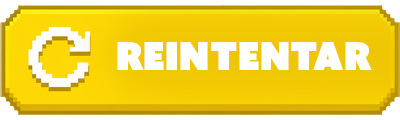
<style>
.page{position:relative;width:400px;height:120px;background:#ffffff}
.page>*{position:absolute;margin:0}
.t1{font:37.5px "AzoSansUber-Regular";letter-spacing:0.01em;color:#ffffff;text-transform:uppercase;scale:0.95 1}
</style>
<div class="page">
<p class="t1" style="left:117px;top:42px;width:255px;height:28px">rEINTENTAR</p>
</div>
